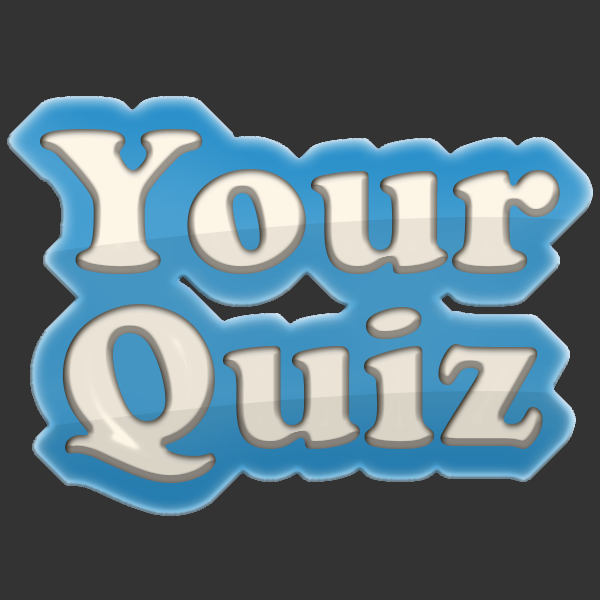
<style>
.page{position:relative;width:600px;height:600px;background:#333333}
.page>*{position:absolute;margin:0}
.t1{font:208.3px/175px "CooperBlack"}
</style>
<div class="page">
<p class="t1" style="left:40px;top:129px;width:520px;height:354px;text-align:center">Your<br>Quiz</p>
</div>
